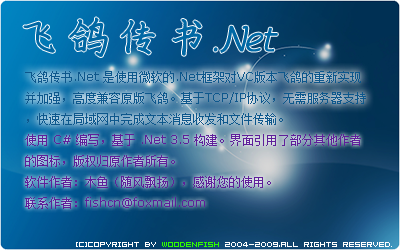
<style>
.page{position:relative;width:400px;height:250px}
.page>*{position:absolute;margin:0}
.t1{font:12px "SimSun";color:#0d578c}
.t2{font:12px "Verdana";color:#0d578c}
.t3{font:12px "SimSun";color:#5f1f9a}
.t4{font:12px "Verdana";color:#5f1f9a}
.t5{font:6px "04b08";color:#ffffff}
.t6{font:6px "04b08";color:#30ff00}
</style>
<div class="page">
<p class="t1" style="left:25px;top:71px;width:341px;height:54px">飞鸽传书<span class="t2">.Net </span>是使用微软的<span class="t2">.Net</span>框架对<span class="t2">VC</span>版本飞鸽的重新实现并加强，高度兼容原版飞鸽。基于<span class="t2">TCP/IP</span>协议，无需服务器支持，快速在局域网中完成文本消息收发和文件传输。</p>
<p class="t3" style="left:25px;top:134px;width:336px;height:75px">使用<span class="t4"> C# </span>编写，基于<span class="t4"> .Net 3.5 </span>构建。界面引用了部分其他作者的图标，版权归原作者所有。<br>软件作者：木鱼（随风飘扬），感谢您的使用。<br>联系作者：<span class="t4">fishcn@foxmail.com</span></p>
<p class="t5" style="left:76px;top:242px;width:316px;height:5px">[C]CopyRight BY <span class="t6">woodenfish</span> 2004-2009,All Rights Reserved.</p>
</div>
